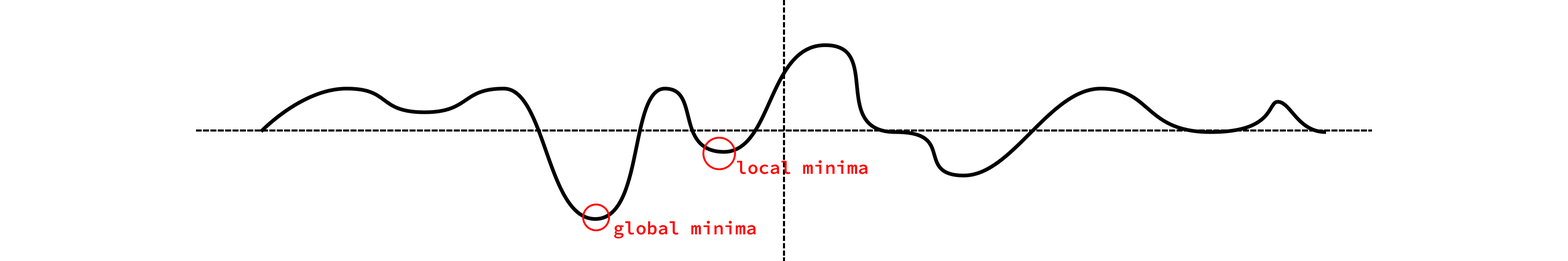
<style>
.page{position:relative;width:1568px;height:261px;background:#ffffff}
.page>*{position:absolute;margin:0}
.t1{font:18.4px "SourceCodeRoman-Semibold";color:#ff0000}
</style>
<div class="page">
<p class="t1" style="left:737px;top:160px;width:131px;height:15px">local minima</p>
<p class="t1" style="left:614px;top:221px;width:142px;height:18px">global minima</p>
</div>
